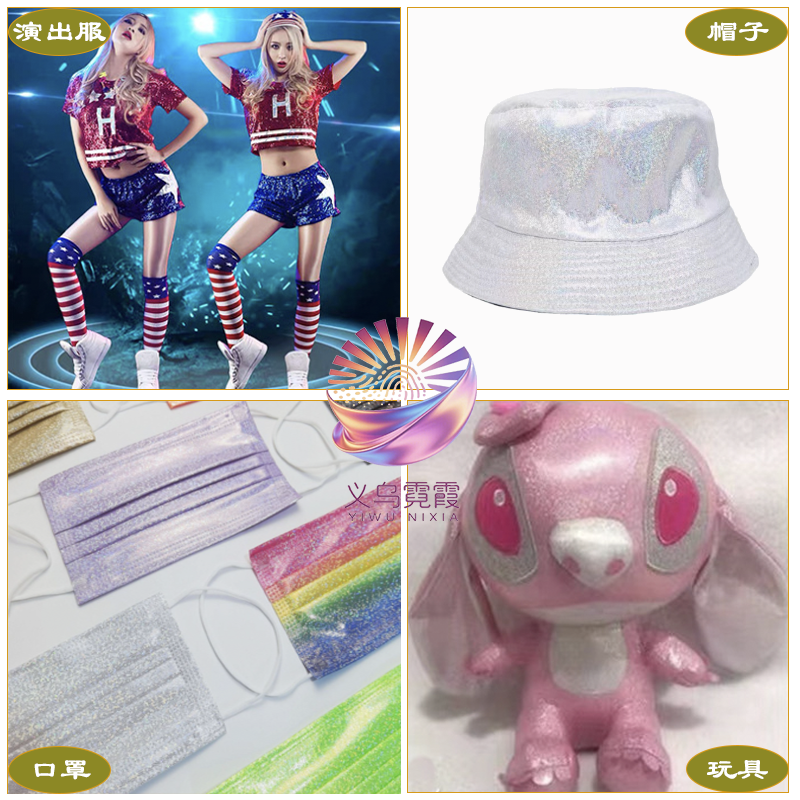
<style>
.page{position:relative;width:800px;height:800px}
.page>*{position:absolute;margin:0}
.t1{font:31px "STBaoliSC-Regular";color:#ffffff}
</style>
<div class="page">
<p class="t1" style="left:13px;top:21px;width:93px;height:21px">演出服</p>
<p class="t1" style="left:707px;top:22px;width:62px;height:19px">帽子</p>
<p class="t1" style="left:34px;top:760px;width:57px;height:20px">口罩</p>
<p class="t1" style="left:707px;top:760px;width:61px;height:19px">玩具</p>
</div>
